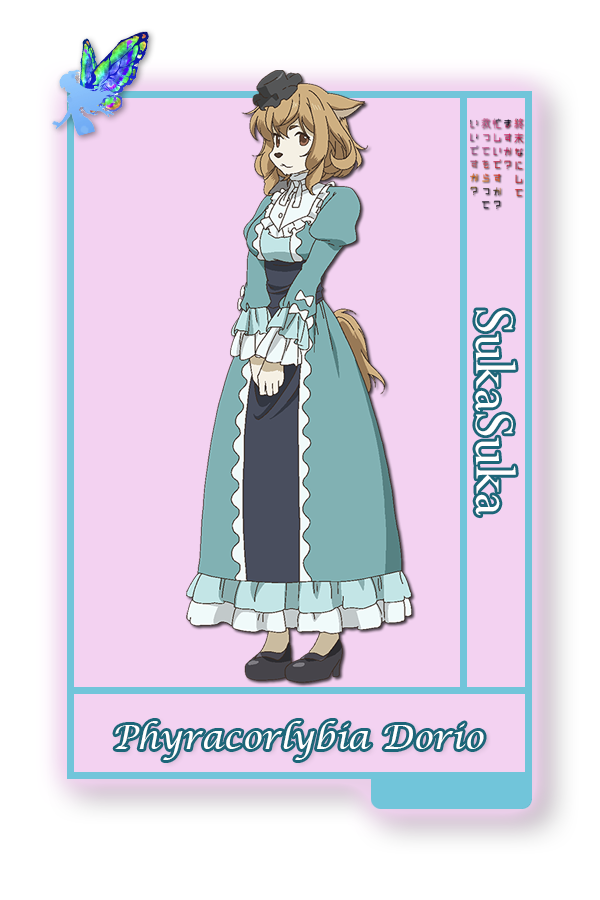
<style>
.page{position:relative;width:600px;height:900px;background:#f3d2f1}
.page>*{position:absolute;margin:0}
.t1{font:62.5px "Perpetua";color:#ffffff}
.t2{font:33.3px "LucidaCalligraphy-Italic";color:#ffffff}
</style>
<div class="page">
<p class="t1" style="left:475px;top:310px;width:41px;height:206px;rotate:90deg">SukaSuka</p>
<p class="t2" style="left:115px;top:721px;width:369px;height:39px">Phyracorlybia Dorio</p>
</div>
